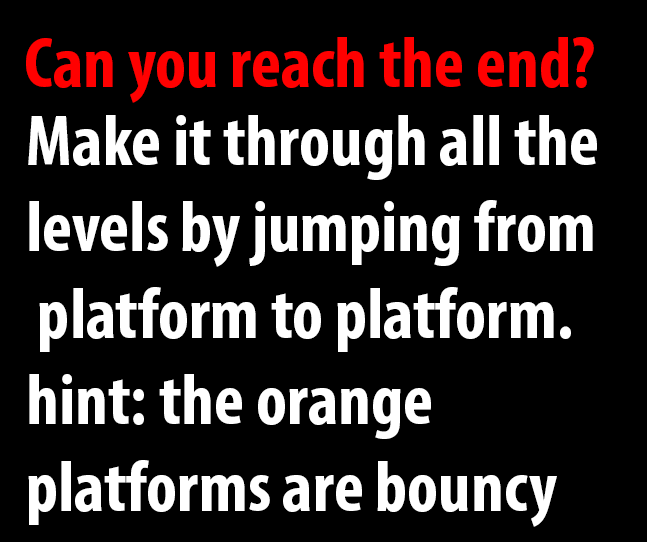
<style>
.page{position:relative;width:647px;height:542px;background:#000000}
.page>*{position:absolute;margin:0}
.t1{font:72px "MyriadPro-BoldCond";color:#ff0000}
.t2{font:72px "MyriadPro-BoldCond";color:#ffffff}
</style>
<div class="page">
<p class="t1" style="left:26px;top:37px;width:568px;height:66px">Can you reach the end?</p>
<p class="t2" style="left:28px;top:115px;width:569px;height:412px">Make it through all the <br>levels by jumping from<br> platform to platform. <br>hint: the orange <br>platforms are bouncy</p>
</div>
